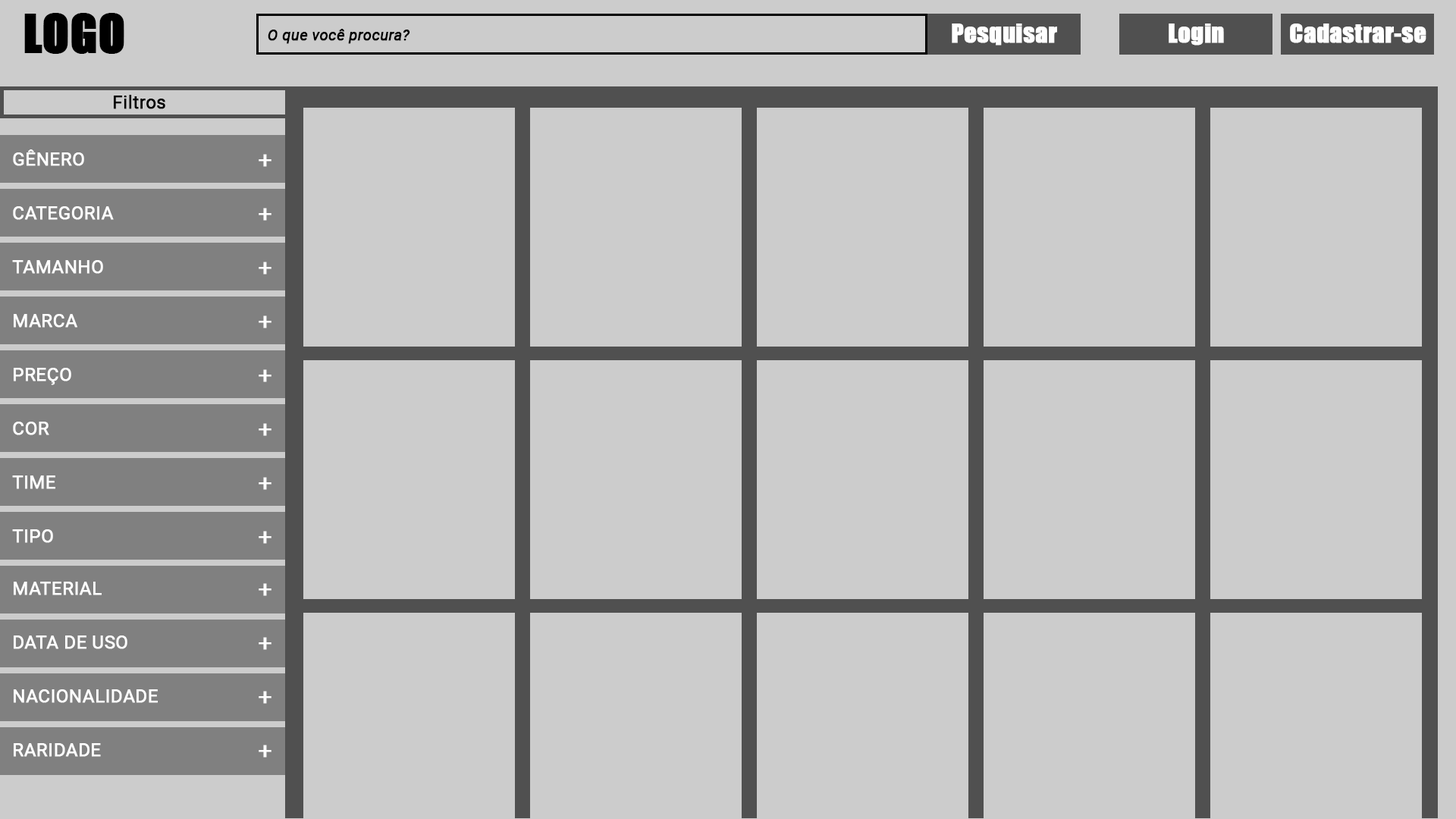
<style>
.page{position:relative;width:1456px;height:819px;background:#cccccc}
.page>*{position:absolute;margin:0}
.t1{font:48.5px "Impact";color:#000000;font-weight:bold}
.t2{font:15.2px "Roboto-Italic";color:#000000;font-weight:bold}
.t3{font:24.3px "Impact";color:#ffffff;font-weight:bold}
.t4{font:18.2px "Roboto-Regular";color:#000000;font-weight:bold}
.t5{font:18.2px "Roboto-Regular";color:#ffffff;font-weight:bold}
.t6{font:24.3px "Roboto-Regular";color:#ffffff;font-weight:bold}
</style>
<div class="page">
<p class="t1" style="left:24px;top:13px;width:100px;height:41px">LOGO</p>
<p class="t2" style="left:268px;top:29px;width:142px;height:15px">O que você procura?</p>
<p class="t3" style="left:952px;top:24px;width:105px;height:21px">Pesquisar</p>
<p class="t3" style="left:1169px;top:24px;width:55px;height:21px">Login</p>
<p class="t3" style="left:1290px;top:24px;width:136px;height:19px">Cadastrar-se</p>
<p class="t4" style="left:114px;top:95px;width:51px;height:14px">Filtros</p>
<p class="t5" style="left:13px;top:149px;width:71px;height:17px">GÊNERO</p>
<p class="t6" style="left:259px;top:154px;width:12px;height:13px">+</p>
<p class="t5" style="left:13px;top:206px;width:101px;height:14px">CATEGORIA</p>
<p class="t6" style="left:259px;top:208px;width:12px;height:13px">+</p>
<p class="t5" style="left:12px;top:260px;width:91px;height:14px">TAMANHO</p>
<p class="t6" style="left:259px;top:262px;width:12px;height:13px">+</p>
<p class="t5" style="left:14px;top:314px;width:63px;height:14px">MARCA</p>
<p class="t6" style="left:259px;top:315px;width:12px;height:13px">+</p>
<p class="t5" style="left:14px;top:368px;width:57px;height:17px">PREÇO</p>
<p class="t6" style="left:259px;top:369px;width:12px;height:13px">+</p>
<p class="t5" style="left:13px;top:422px;width:36px;height:13px">COR</p>
<p class="t6" style="left:259px;top:423px;width:12px;height:13px">+</p>
<p class="t5" style="left:12px;top:475px;width:43px;height:14px">TIME</p>
<p class="t6" style="left:259px;top:477px;width:12px;height:13px">+</p>
<p class="t5" style="left:12px;top:529px;width:41px;height:14px">TIPO</p>
<p class="t6" style="left:259px;top:531px;width:12px;height:13px">+</p>
<p class="t5" style="left:14px;top:582px;width:88px;height:13px">MATERIAL</p>
<p class="t6" style="left:259px;top:583px;width:12px;height:13px">+</p>
<p class="t5" style="left:14px;top:635px;width:113px;height:14px">DATA DE USO</p>
<p class="t6" style="left:259px;top:637px;width:12px;height:13px">+</p>
<p class="t5" style="left:14px;top:689px;width:144px;height:14px">NACIONALIDADE</p>
<p class="t6" style="left:259px;top:691px;width:12px;height:13px">+</p>
<p class="t5" style="left:14px;top:743px;width:87px;height:14px">RARIDADE</p>
<p class="t6" style="left:259px;top:745px;width:12px;height:13px">+</p>
</div>
